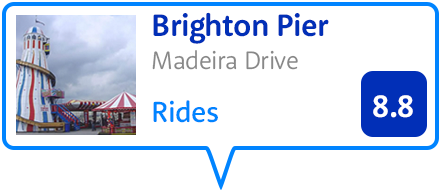
<style>
.page{position:relative;width:443px;height:193px;background:#ffffff}
.page>*{position:absolute;margin:0}
.t1{font:32px "RooneySans-Bold";letter-spacing:-0.02em;color:#012fb7;scale:0.97 1}
.t2{font:26px "RooneySans-Light";letter-spacing:-0.02em;color:#888888;scale:0.97 1}
.t3{font:30px "RooneySans-Medium";letter-spacing:-0.02em;color:#0084ff;scale:0.97 1}
.t4{font:32px "RooneySans-Bold";letter-spacing:-0.02em;color:#ffffff;scale:0.97 1}
</style>
<div class="page">
<p class="t1" style="left:153px;top:12px;width:176px;height:32px">Brighton Pier</p>
<p class="t2" style="left:152px;top:50px;width:146px;height:20px">Madeira Drive</p>
<p class="t3" style="left:153px;top:100px;width:65px;height:23px">Rides</p>
<p class="t4" style="left:373px;top:95px;width:40px;height:23px">8.8</p>
</div>
